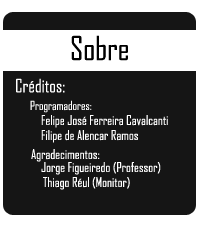
<style>
.page{position:relative;width:200px;height:230px;background:#151515}
.page>*{position:absolute;margin:0}
.t1{font:31.6px "AgencyFB-Reg";color:#000000}
.t2{font:17.7px "AgencyFB-Reg";color:#ffffff}
.t3{font:12px "AgencyFB-Reg";color:#ffffff}
.t4{font:13px "AgencyFB-Reg";color:#ffffff}
</style>
<div class="page">
<p class="t1" style="left:71px;top:35px;width:57px;height:26px">Sobre</p>
<p class="t2" style="left:16px;top:78px;width:49px;height:15px">Créditos:</p>
<p class="t3" style="left:30px;top:100px;width:62px;height:13px">Programadores:</p>
<p class="t4" style="left:41px;top:115px;width:127px;height:13px">Felipe José Ferreira Cavalcanti</p>
<p class="t4" style="left:41px;top:130px;width:97px;height:13px">Filipe de Alencar Ramos</p>
<p class="t4" style="left:31px;top:149px;width:69px;height:13px">Agradecimentos:</p>
<p class="t4" style="left:41px;top:162px;width:120px;height:13px">Jorge Figueiredo (Professor)</p>
<p class="t4" style="left:43px;top:177px;width:87px;height:13px">Thiago Réul (Monitor)</p>
</div>
